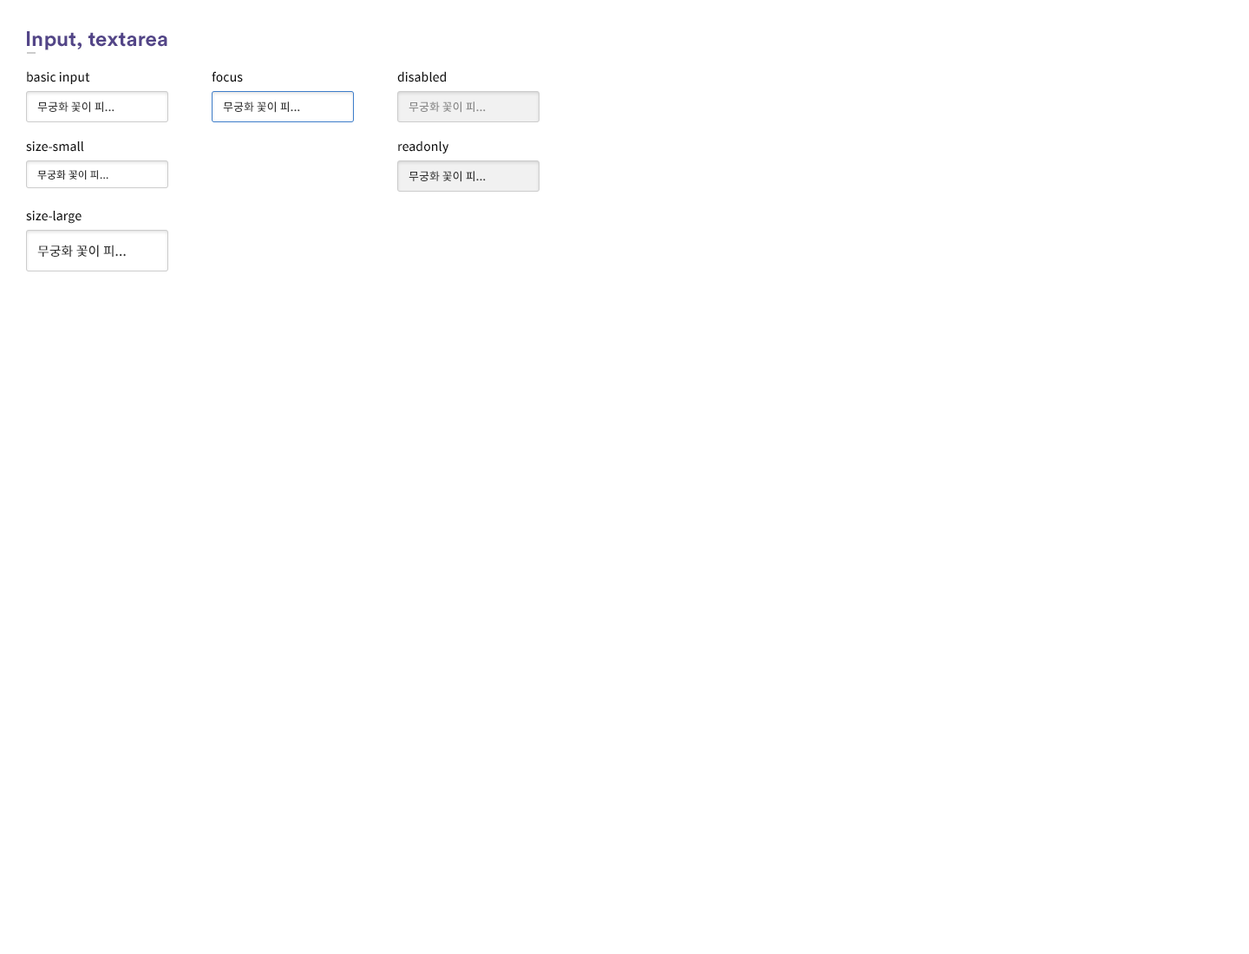
<style>
.page{position:relative;width:1249px;height:954px;background:#ffffff}
.page>*{position:absolute;margin:0}
.t1{font:20.8px "CircularStd-Bold";color:#534588}
.t2{font:12.1px "SourceHanSansKR-Medium";color:#111111}
.t3{font:11.3px "SourceHanSansKR-Medium";color:#333333}
.t4{font:11.3px "SourceHanSansKR-Medium";color:#888888}
.t5{font:10.4px "SourceHanSansKR-Medium";color:#333333}
.t6{font:13px "SourceHanSansKR-Medium";color:#333333}
</style>
<div class="page">
<p class="t1" style="left:27px;top:31px;width:140px;height:19px">Input, textarea</p>
<p class="t2" style="left:27px;top:71px;width:63px;height:13px">basic input</p>
<p class="t2" style="left:212px;top:71px;width:31px;height:11px">focus</p>
<p class="t2" style="left:397px;top:71px;width:49px;height:11px">disabled</p>
<p class="t3" style="left:37px;top:102px;width:78px;height:11px">무궁화 꽃이 피...</p>
<p class="t3" style="left:223px;top:102px;width:77px;height:11px">무궁화 꽃이 피...</p>
<p class="t4" style="left:409px;top:102px;width:77px;height:11px">무궁화 꽃이 피...</p>
<p class="t2" style="left:26px;top:141px;width:58px;height:11px">size-small</p>
<p class="t2" style="left:398px;top:141px;width:51px;height:13px">readonly</p>
<p class="t5" style="left:37px;top:170px;width:71px;height:10px">무궁화 꽃이 피...</p>
<p class="t3" style="left:409px;top:171px;width:77px;height:11px">무궁화 꽃이 피...</p>
<p class="t2" style="left:26px;top:211px;width:56px;height:13px">size-large</p>
<p class="t6" style="left:37px;top:245px;width:89px;height:13px">무궁화 꽃이 피...</p>
</div>
